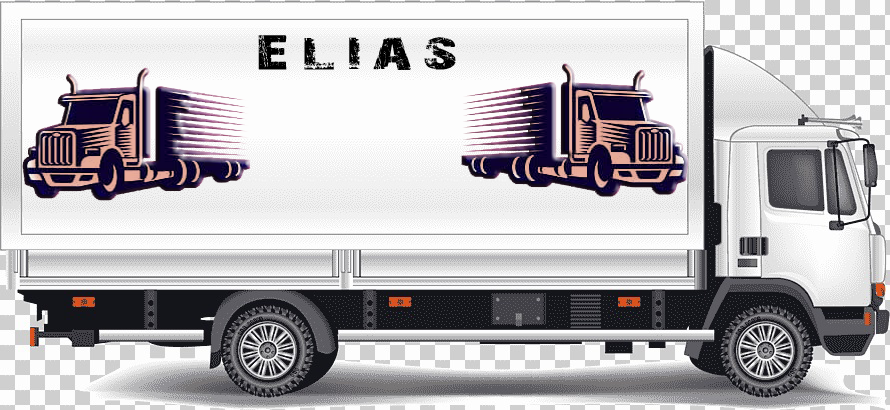
<style>
.page{position:relative;width:890px;height:410px}
.page>*{position:absolute;margin:0}
.t1{font:48px "28-Days-Later-Regular";letter-spacing:0.15em;color:#000000;scale:1.54 1}
</style>
<div class="page">
<p class="t1" style="left:258px;top:35px;width:198px;height:35px">Elias</p>
</div>
